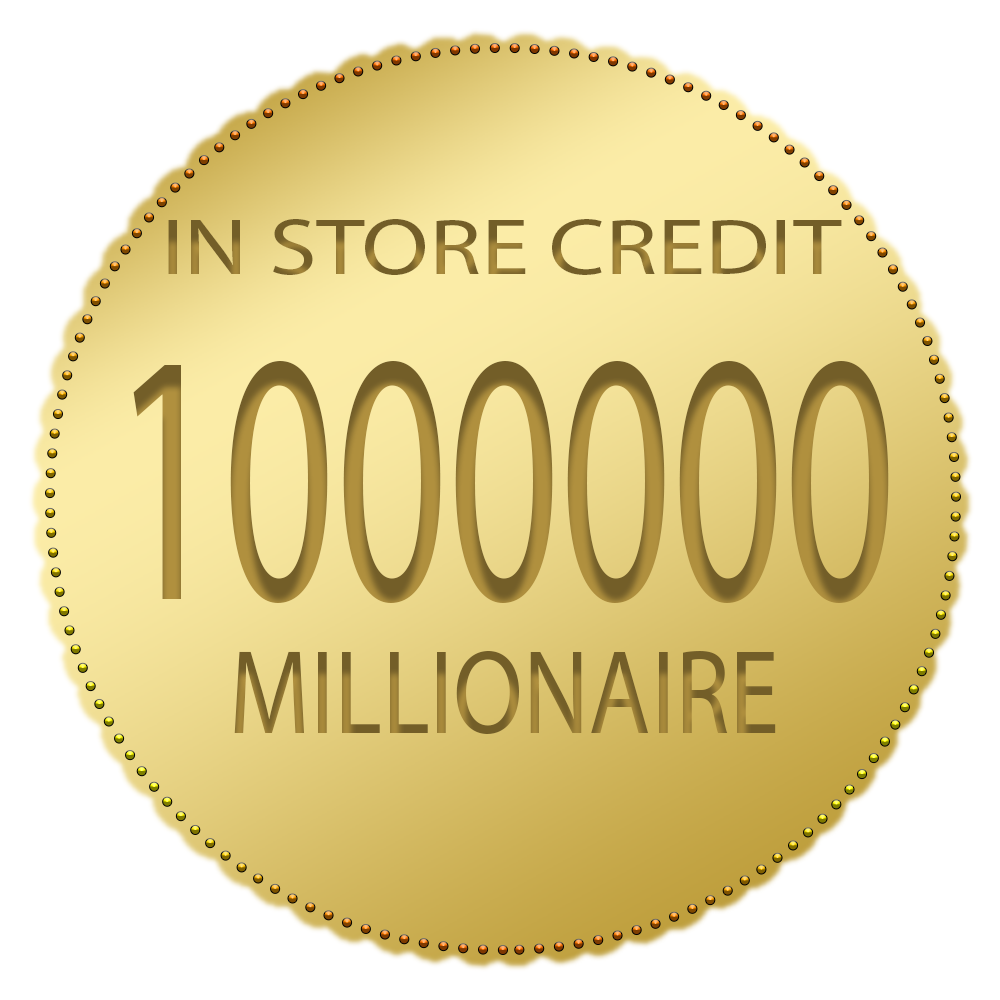
<style>
.page{position:relative;width:1000px;height:1000px;background:#ffffff}
.page>*{position:absolute;margin:0}
.t1{font:80px "MyriadPro-Regular";scale:1.21 1}
.t2{font:360.4px "MyriadPro-Regular";color:#b0903e;scale:0.61 1}
.t3{font:120px "MyriadPro-Regular";scale:0.84 1}
</style>
<div class="page">
<p class="t1" style="left:168px;top:219px;width:674px;height:56px">IN STORE CREDIT</p>
<p class="t2" style="left:133px;top:361px;width:756px;height:242px">1000000</p>
<p class="t3" style="left:234px;top:651px;width:542px;height:83px">MILLIONAIRE</p>
</div>
